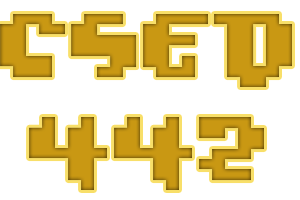
<style>
.page{position:relative;width:300px;height:200px;background:#ffffff}
.page>*{position:absolute;margin:0}
.t1{font:93.4px/102.7px "Oxygene1";color:#c99813;scale:1.25 1}
</style>
<div class="page">
<p class="t1" style="left:0px;top:14px;width:292px;height:176px;text-align:center">CSED<br>442</p>
</div>
